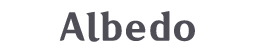
<style>
.page{position:relative;width:256px;height:56px;background:#ffffff}
.page>*{position:absolute;margin:0}
.t1{font:36px "HYWenHei-HEW";color:#4f4e57}
</style>
<div class="page">
<p class="t1" style="left:59px;top:11px;width:136px;height:31px">Albedo</p>
</div>
